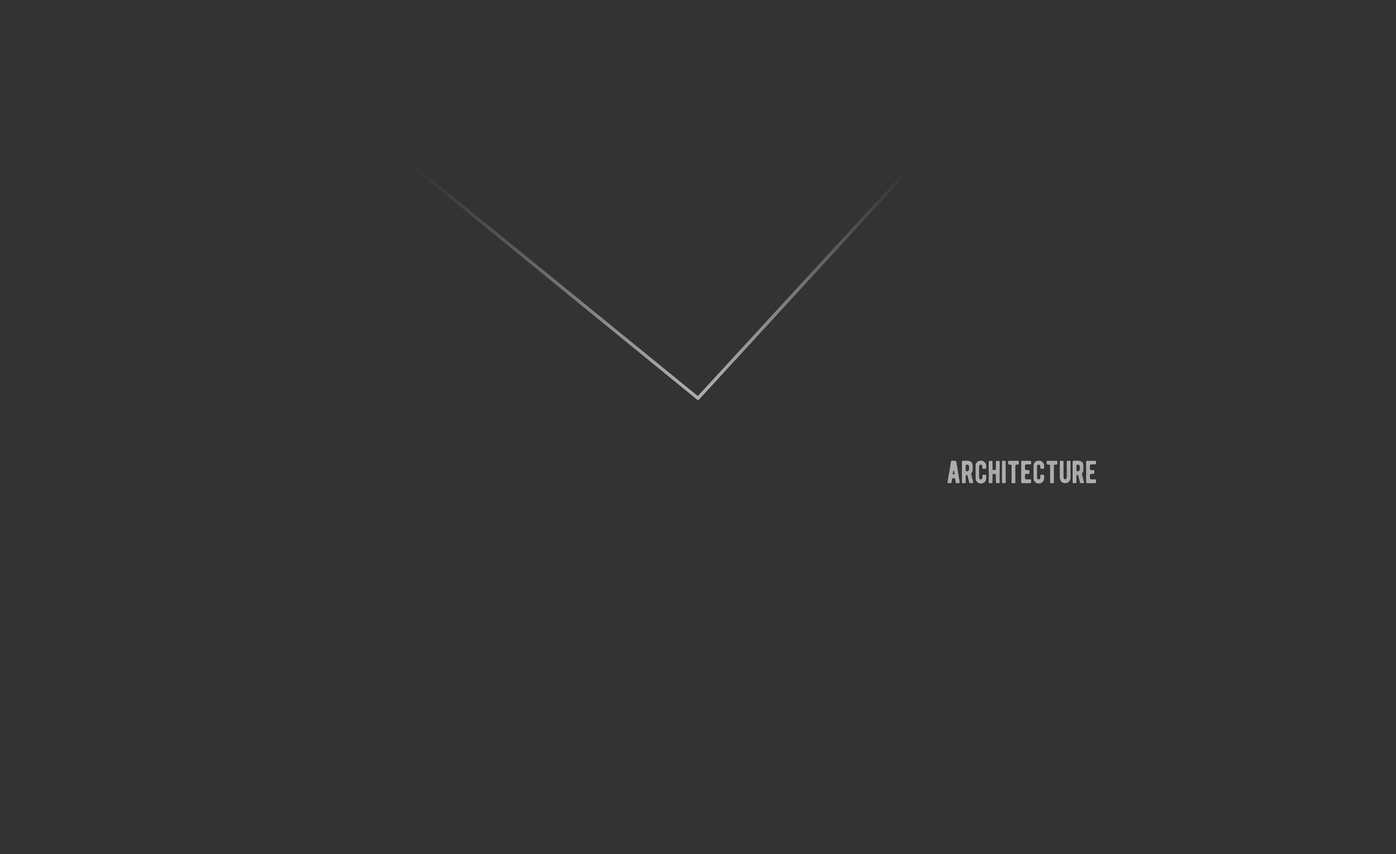
<style>
.page{position:relative;width:1396px;height:854px;background:#333333}
.page>*{position:absolute;margin:0}
.t1{font:31.9px "BERNIERDISTRESSED";color:#aeaeae}
</style>
<div class="page">
<p class="t1" style="left:947px;top:461px;width:149px;height:23px">architecture</p>
</div>
